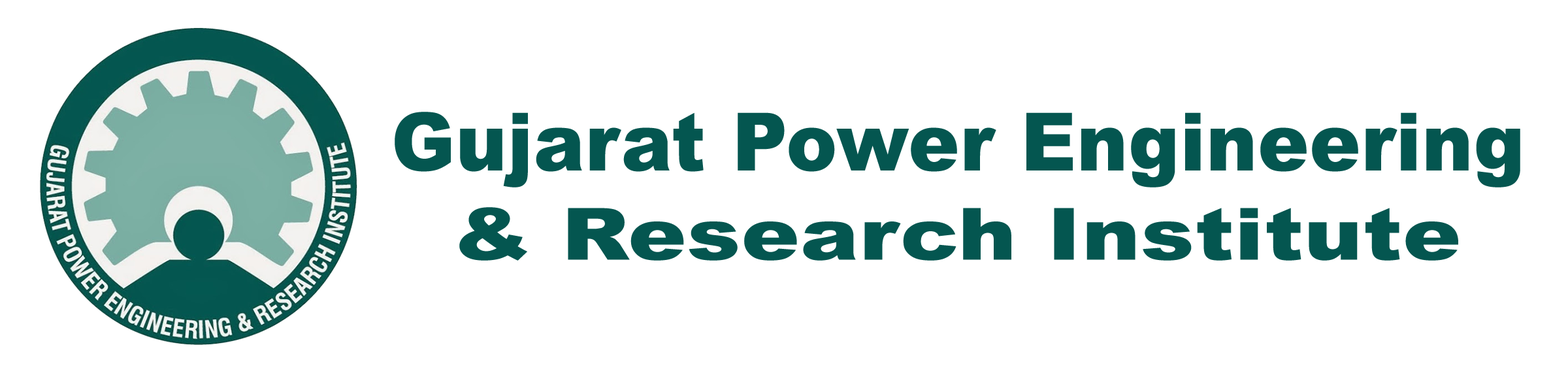
<style>
.page{position:relative;width:1568px;height:373px;background:#ffffff}
.page>*{position:absolute;margin:0}
.t1{font:80.4px "Arial-Black";letter-spacing:0.009em;color:#045650;scale:0.95 1}
.t2{font:71.9px "Arial-Black";letter-spacing:0.009em;color:#045650;scale:1.22 1}
</style>
<div class="page">
<p class="t1" style="left:395px;top:112px;width:1125px;height:76px">Gujarat Power Engineering</p>
<p class="t2" style="left:459px;top:207px;width:999px;height:54px">&amp; Research Institute</p>
</div>
